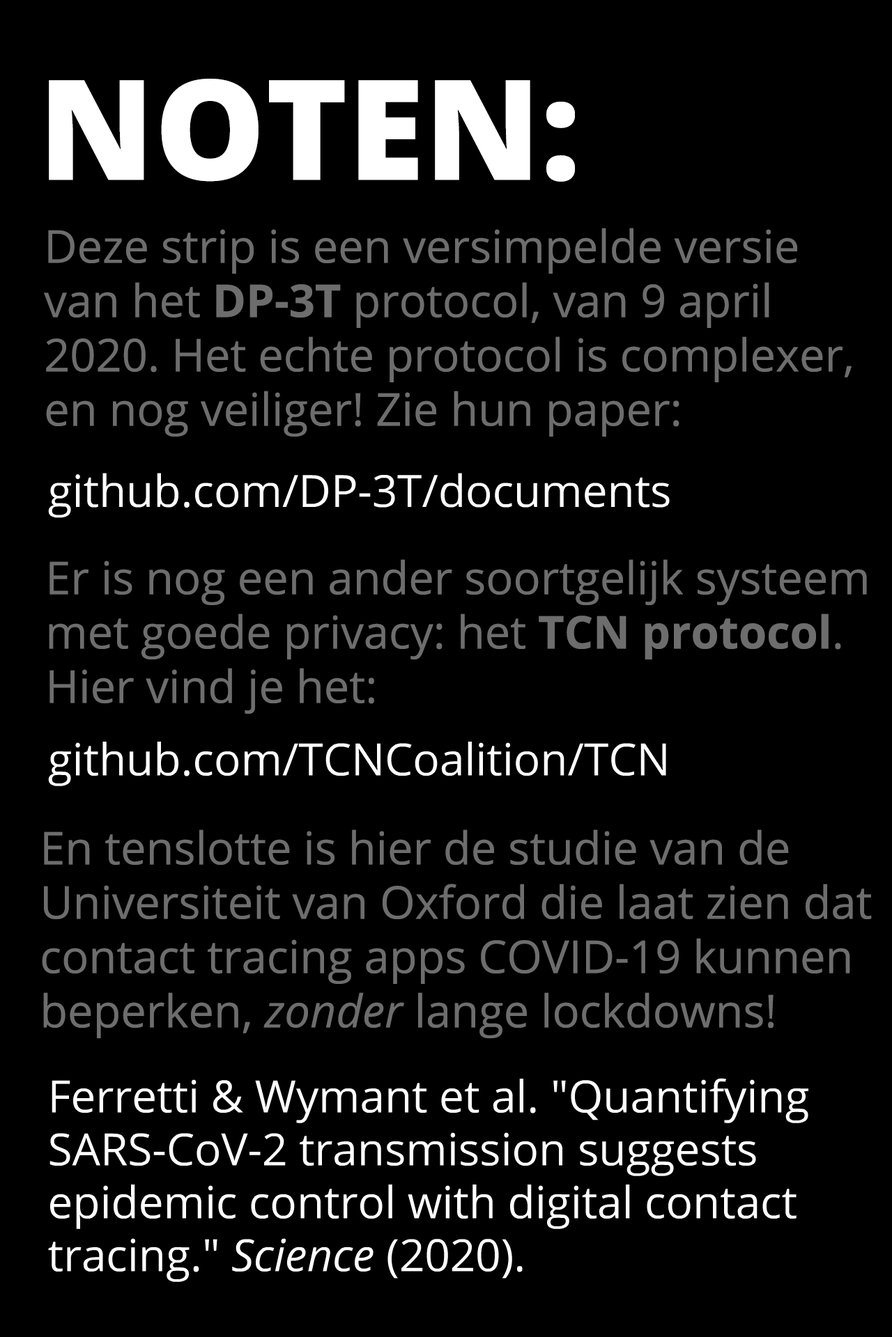
<style>
.page{position:relative;width:892px;height:1337px;background:#000000}
.page>*{position:absolute;margin:0}
.t1{font:139.3px "OpenSans-ExtraBold";color:#ffffff}
.t2{font:45.3px "OpenSans-Regular";color:#6d6d6d}
.t3{font:45.3px "OpenSans-Bold";color:#6d6d6d}
.t4{font:45.3px "OpenSans-Italic";color:#6d6d6d}
</style>
<div class="page">
<p class="t1" style="left:49px;top:79px;width:526px;height:103px">NOTEN:</p>
<p class="t2" style="left:44px;top:228px;width:807px;height:209px">Deze strip is een versimpelde versie<br>van het <span class="t3">DP-3T</span> protocol, van 9 april<br>2020. Het echte protocol is complexer,<br>en nog veiliger! Zie hun paper:</p>
<p class="t2" style="left:49px;top:559px;width:818px;height:155px">Er is nog een ander soortgelijk systeem<br>met goede privacy: het <span class="t3">TCN protocol</span>. <br>Hier vind je het:</p>
<p class="t2" style="left:42px;top:830px;width:829px;height:209px">En tenslotte is hier de studie van de<br>Universiteit van Oxford die laat zien dat<br>contact tracing apps COVID-19 kunnen<br>beperken, <span class="t4">zonder</span> lange lockdowns!</p>
</div>
